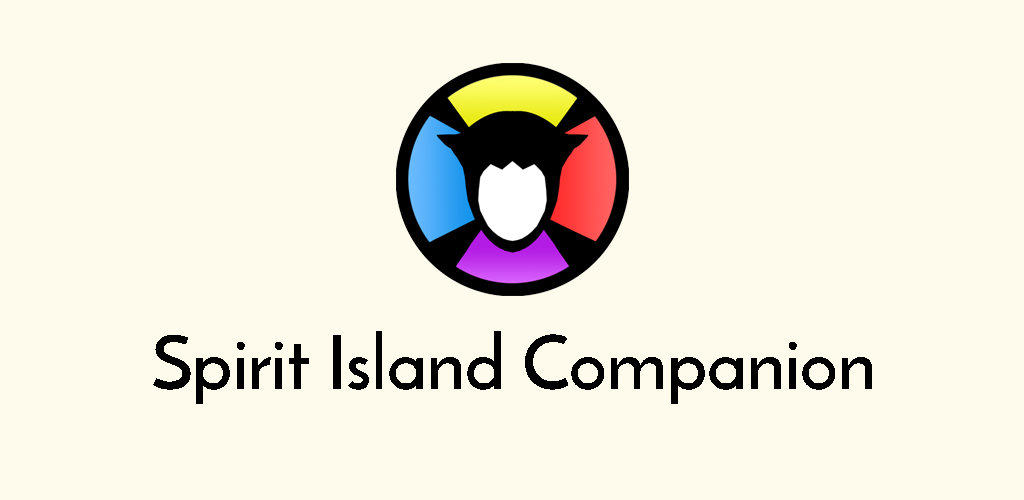
<style>
.page{position:relative;width:1024px;height:500px;background:#fffbec}
.page>*{position:absolute;margin:0}
.t1{font:74.5px "ReemKufi-Regular";color:#000000}
</style>
<div class="page">
<p class="t1" style="left:153px;top:331px;width:719px;height:73px">Spirit Island Companion</p>
</div>
